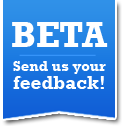
<style>
.page{position:relative;width:122px;height:126px}
.page>*{position:absolute;margin:0}
.t1{font:35.8px "Rockwell-Bold";letter-spacing:-0.01em;color:#ffffff}
.t2{font:15px/18px "Rockwell-Bold";color:#ffffff}
.t3{font:19px/18px "Rockwell-Bold";color:#ffffff}
</style>
<div class="page">
<p class="t1" style="left:12px;top:22px;width:96px;height:25px">BETA</p>
<p class="t2" style="left:13px;top:61px;width:93px;height:28px;text-align:center">Send us your <br><span class="t3">feedback!</span></p>
</div>
